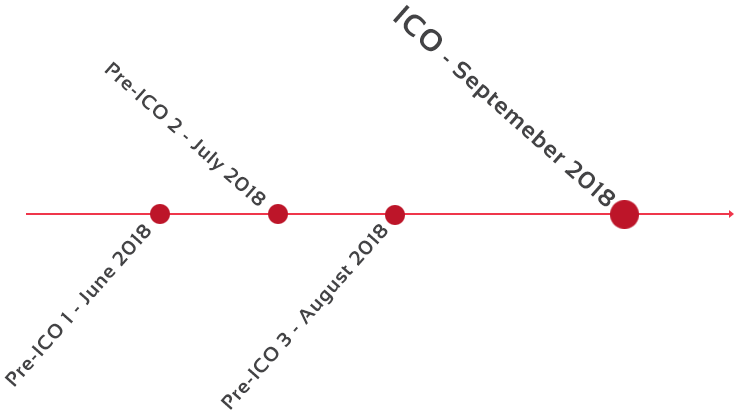
<style>
.page{position:relative;width:746px;height:418px;background:#ffffff}
.page>*{position:absolute;margin:0}
.t1{font:24px "Sansation-Bold";letter-spacing:0.05em;color:#434345}
.t2{font:30px "Sansation-Bold";letter-spacing:0.05em;color:#434345}
.t3{font:20px "Sansation-Bold";letter-spacing:0.05em;color:#434345}
</style>
<div class="page">
<p class="t1" style="left:393px;top:4px;width:223px;height:203px;rotate:41deg"><span class="t2">ICO</span> - Septemeber 2018</p>
<p class="t3" style="left:104px;top:61px;width:162px;height:145px;rotate:41deg">Pre-ICO 2 - July 2018</p>
<p class="t3" style="left:4px;top:224px;width:147px;height:163px;rotate:-48deg">Pre-ICO 1 - June 2018</p>
<p class="t3" style="left:220px;top:224px;width:168px;height:186px;rotate:-48deg">Pre-ICO 3 - August 2018</p>
</div>
